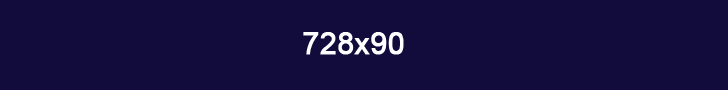
<style>
.page{position:relative;width:728px;height:90px;background:#110c3c}
.page>*{position:absolute;margin:0}
.t1{font:30px "ArialMT";color:#ffffff;font-weight:bold}
</style>
<div class="page">
<p class="t1" style="left:303px;top:32px;width:101px;height:23px">728x90</p>
</div>
